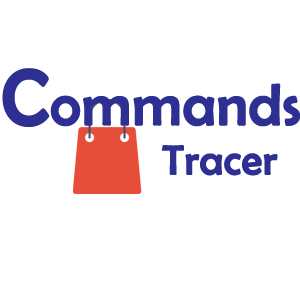
<style>
.page{position:relative;width:300px;height:300px;background:#ffffff}
.page>*{position:absolute;margin:0}
.t1{font:58.3px "BerlinSansFB-Reg";color:#2d2f93;font-weight:bold}
.t2{font:79.2px "BerlinSansFB-Reg";color:#2d2f93;font-weight:bold}
.t3{font:41.7px "BerlinSansFB-Reg";color:#2d2f93;font-weight:bold}
</style>
<div class="page">
<p class="t1" style="left:2px;top:68px;width:299px;height:59px"><span class="t2">C</span>ommands</p>
<p class="t3" style="left:161px;top:145px;width:117px;height:31px">Tracer</p>
</div>
